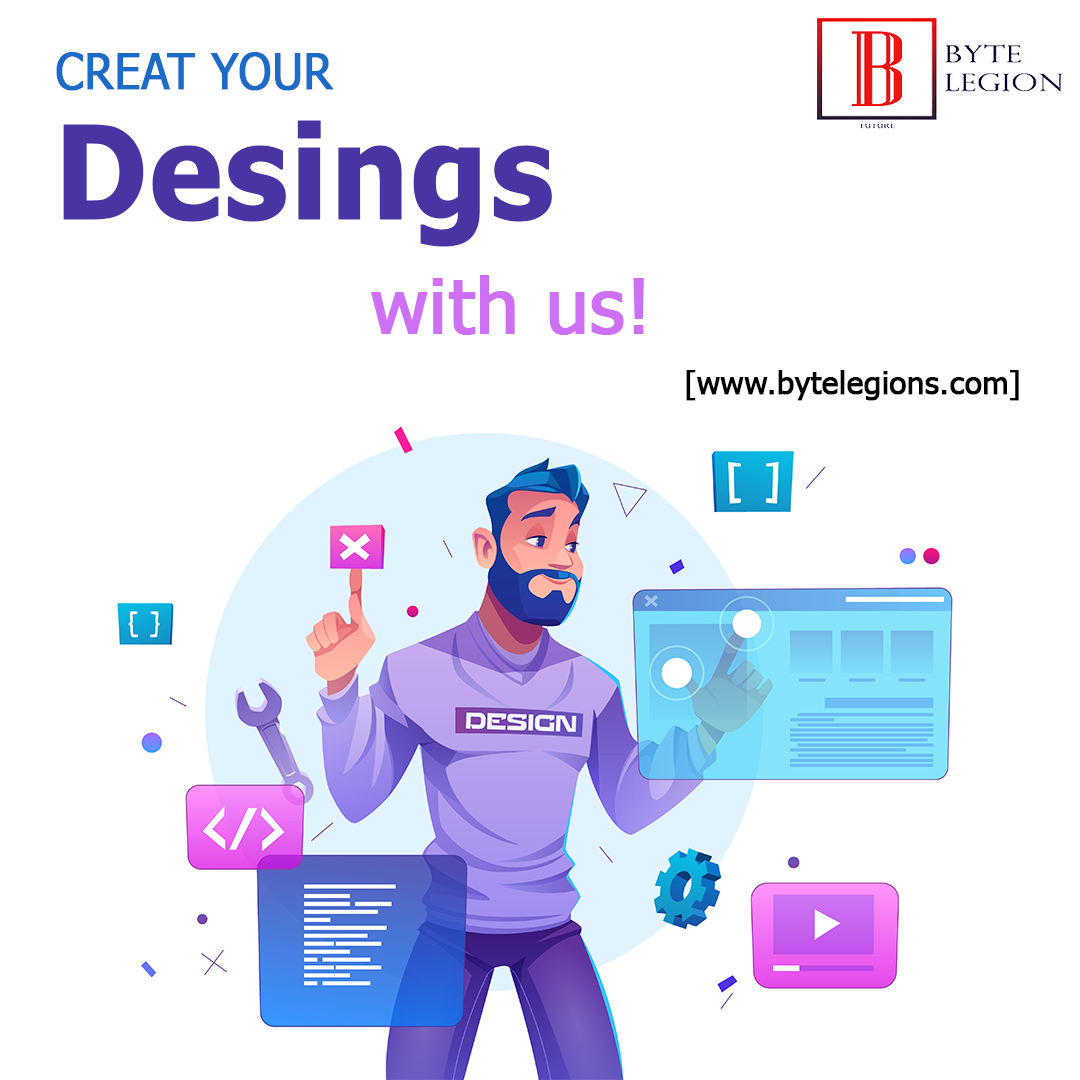
<style>
.page{position:relative;width:1080px;height:1080px;background:#ffffff}
.page>*{position:absolute;margin:0}
.t1{font:48.9px/130px "Tahoma";color:#1c6bc6;text-transform:uppercase;font-weight:bold;scale:0.94 1}
.t2{font:128.9px/130px "Tahoma-Bold";color:#4a33a3;font-weight:bold;scale:0.94 1}
.t3{font:75.7px "Tahoma";color:#cd70f4;font-weight:bold}
.t4{font:30.7px "Tahoma";color:#000000;font-weight:bold}
</style>
<div class="page">
<p class="t1" style="left:56px;top:52px;width:496px;height:195px">Creat Your<br><span class="t2">Desings</span></p>
<p class="t3" style="left:371px;top:275px;width:273px;height:60px">with us!</p>
<p class="t4" style="left:686px;top:370px;width:333px;height:31px">[www.bytelegions.com]</p>
</div>
